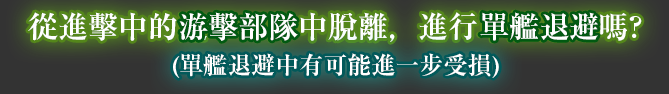
<style>
.page{position:relative;width:669px;height:94px}
.page>*{position:absolute;margin:0}
.t1{font:30px "RyuminPr6N-Bold";color:#ffffff}
.t2{font:24px "RyuminPr6N-Bold";color:#ffffff}
</style>
<div class="page">
<p class="t1" style="left:28px;top:12px;width:614px;height:30px">從進擊中的遊擊部隊中脫離，進行單艦退避嗎?</p>
<p class="t1" style="left:179px;top:12px;width:119px;height:29px">游擊部隊</p>
<p class="t1" style="left:480px;top:12px;width:118px;height:29px">單艦退避</p>
<p class="t2" style="left:173px;top:53px;width:326px;height:25px">(單艦退避中有可能進一步受損)</p>
</div>
